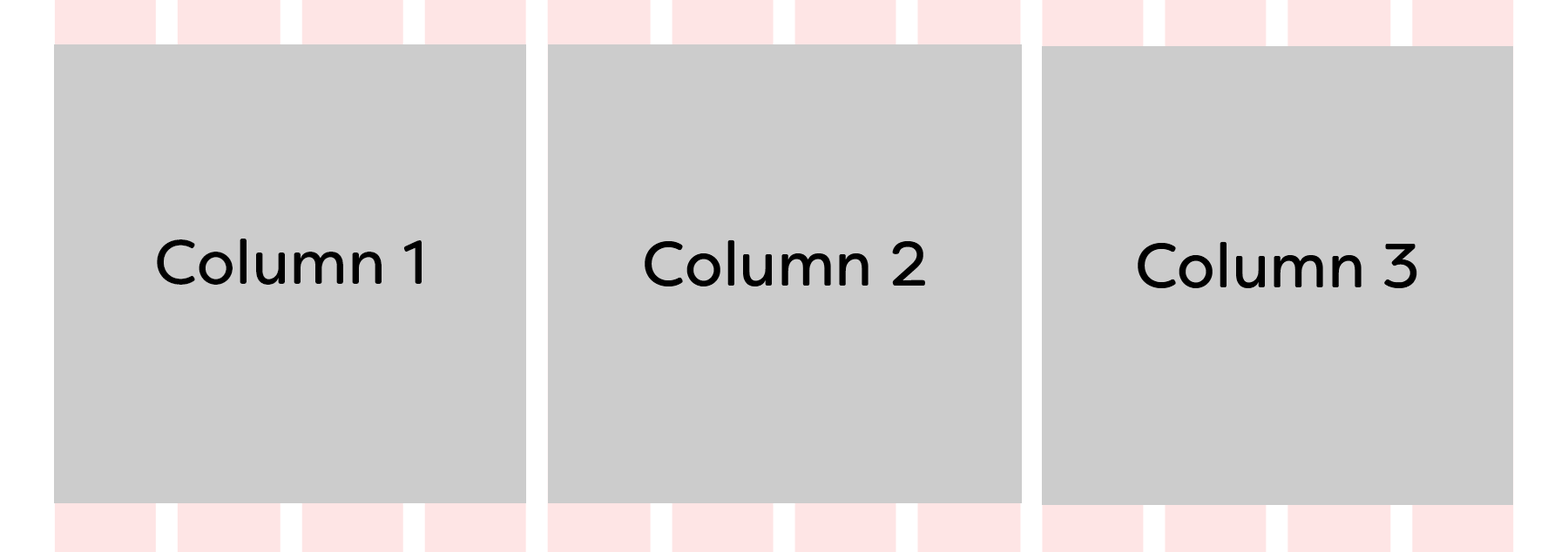
<style>
.page{position:relative;width:1568px;height:552px;background:#cccccc}
.page>*{position:absolute;margin:0}
.t1{font:62.7px "FilsonSoftRegular";color:#000000}
</style>
<div class="page">
<p class="t1" style="left:157px;top:239px;width:265px;height:46px">Column 1</p>
<p class="t1" style="left:645px;top:240px;width:280px;height:47px">Column 2</p>
<p class="t1" style="left:1138px;top:241px;width:279px;height:47px">Column 3</p>
</div>
